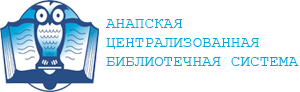
<style>
.page{position:relative;width:300px;height:92px;background:#ffffff}
.page>*{position:absolute;margin:0}
.t1{font:16px "CourierNewPSMT";color:#01a6da}
</style>
<div class="page">
<p class="t1" style="left:106px;top:19px;width:193px;height:47px">АНАПСКАЯ ЦЕНТРАЛИЗОВАННАЯ БИБЛИОТЕЧНАЯ СИСТЕМА</p>
</div>
